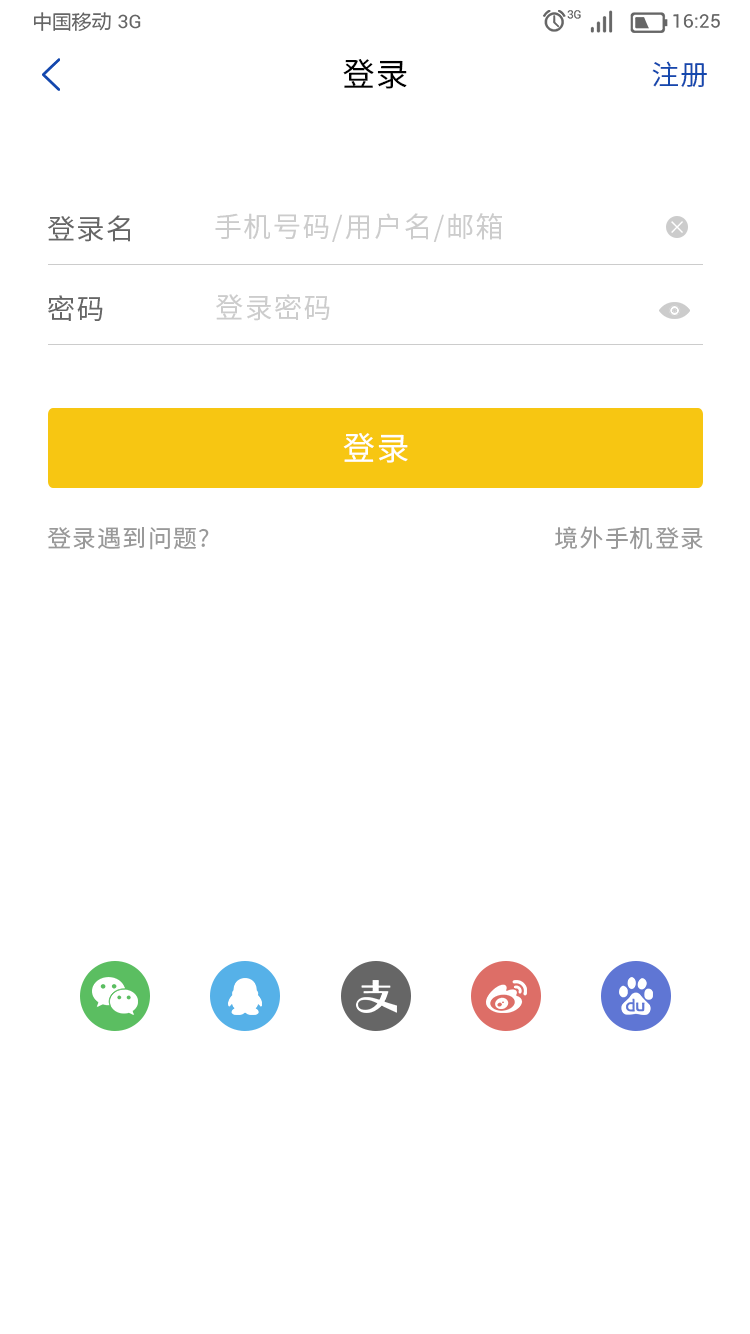
<style>
.page{position:relative;width:750px;height:1334px;background:#ffffff}
.page>*{position:absolute;margin:0}
.t1{font:32px "SourceHanSansCN-Regular";letter-spacing:0.05em;color:#000000}
.t2{font:28px "SourceHanSansCN-Regular";letter-spacing:0.05em;color:#1448ae}
.t3{font:28px "SourceHanSansCN-Regular";letter-spacing:0.05em;color:#666666}
.t4{font:28.1px "SourceHanSansCN-Regular";letter-spacing:0.05em;color:#cccccc}
.t5{font:32px "SourceHanSansCN-Regular";letter-spacing:0.05em;color:#ffffff}
.t6{font:24px "SourceHanSansCN-Regular";letter-spacing:0.05em;color:#999999}
</style>
<div class="page">
<p class="t1" style="left:343px;top:59px;width:64px;height:30px">登录</p>
<p class="t2" style="left:652px;top:61px;width:55px;height:27px">注册</p>
<p class="t3" style="left:48px;top:215px;width:82px;height:27px">登录名</p>
<p class="t4" style="left:215px;top:213px;width:287px;height:29px">手机号码/用户名/邮箱</p>
<p class="t4" style="left:216px;top:294px;width:114px;height:27px">登录密码</p>
<p class="t3" style="left:48px;top:295px;width:55px;height:26px">密码</p>
<p class="t5" style="left:343px;top:433px;width:65px;height:30px">登录</p>
<p class="t6" style="left:47px;top:527px;width:162px;height:23px">登录遇到问题?</p>
<p class="t6" style="left:555px;top:526px;width:148px;height:24px">境外手机登录</p>
</div>
